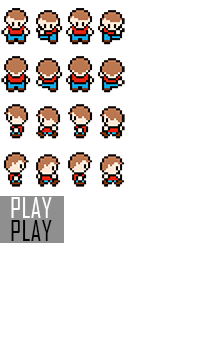
<style>
.page{position:relative;width:216px;height:360px;background:#ffffff}
.page>*{position:absolute;margin:0}
.t1{font:27.2px "AgencyFB-Reg";color:#ffffff}
.t2{font:27.2px "AgencyFB-Reg";color:#000000}
</style>
<div class="page">
<p class="t1" style="left:11px;top:197px;width:41px;height:21px">PLAY</p>
<p class="t2" style="left:11px;top:220px;width:41px;height:21px">PLAY</p>
</div>
